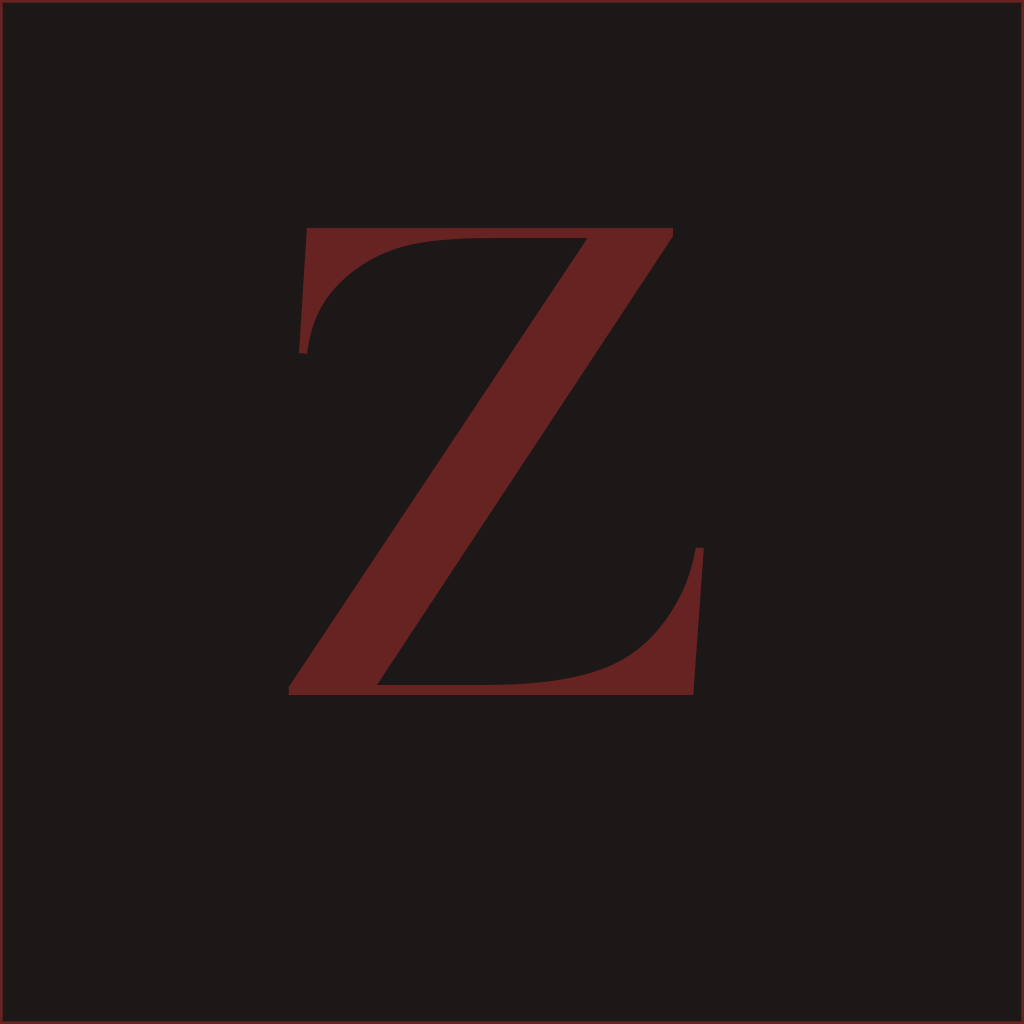
<style>
.page{position:relative;width:1024px;height:1024px;background:#1c1818}
.page>*{position:absolute;margin:0}
.t1{font:700px "BaskOldFace";color:#672222}
</style>
<div class="page">
<p class="t1" style="left:288px;top:227px;width:416px;height:468px">Z</p>
</div>
